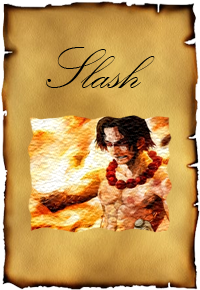
<style>
.page{position:relative;width:200px;height:290px}
.page>*{position:absolute;margin:0}
.t1{font:60px "KunstlerScript";color:#000000;scale:0.97 1}
</style>
<div class="page">
<p class="t1" style="left:46px;top:47px;width:109px;height:41px">Slash</p>
</div>
